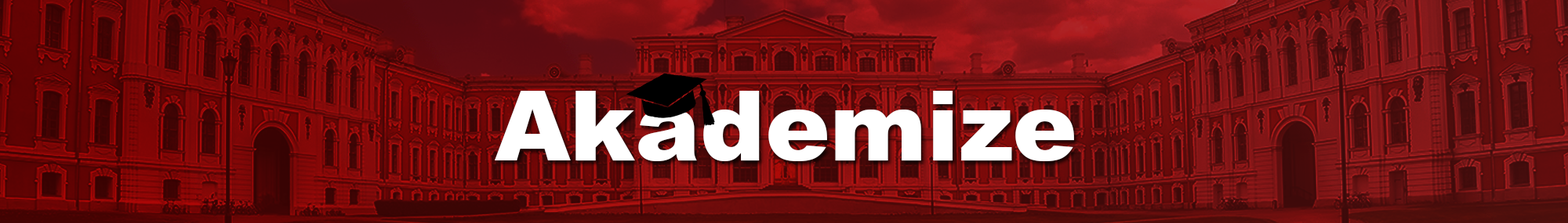
<style>
.page{position:relative;width:1568px;height:223px}
.page>*{position:absolute;margin:0}
.t1{font:97.2px "Arial-Black";color:#ffffff}
</style>
<div class="page">
<p class="t1" style="left:495px;top:91px;width:579px;height:71px">Akademize</p>
</div>
